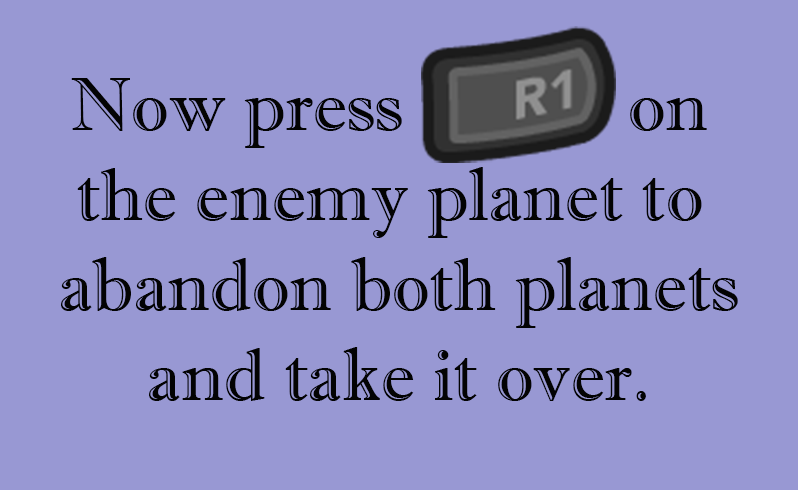
<style>
.page{position:relative;width:798px;height:490px;background:#9898d3}
.page>*{position:absolute;margin:0}
.t1{font:74.8px "ImprintMT-Shadow";color:#030303}
</style>
<div class="page">
<p class="t1" style="left:61px;top:78px;width:677px;height:323px;text-align:center">Now press            on <br>the enemy planet to <br>abandon both planets<br>and take it over.</p>
</div>
